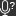
<style>
.page{position:relative;width:16px;height:16px;background:#333333}
.page>*{position:absolute;margin:0}
.t1{font:10px "FranklinGothic-Book";letter-spacing:-0.025em;color:#ffffff}
</style>
<div class="page">
<p class="t1" style="left:10px;top:2px;width:5px;height:7px">?</p>
</div>
